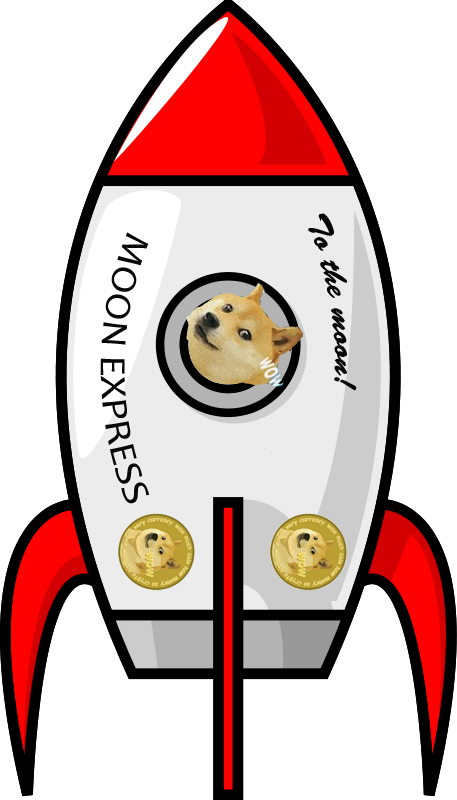
<style>
.page{position:relative;width:457px;height:800px;background:#ffffff}
.page>*{position:absolute;margin:0}
.t1{font:32.2px "BrushScriptStd";color:#070707}
.t2{font:36.7px "Candara";color:#070707}
</style>
<div class="page">
<p class="t1" style="left:308px;top:213px;width:49px;height:178px;rotate:80deg">To the moon!</p>
<p class="t2" style="left:100px;top:232px;width:49px;height:272px;rotate:90deg">MOON EXPRESS</p>
</div>
